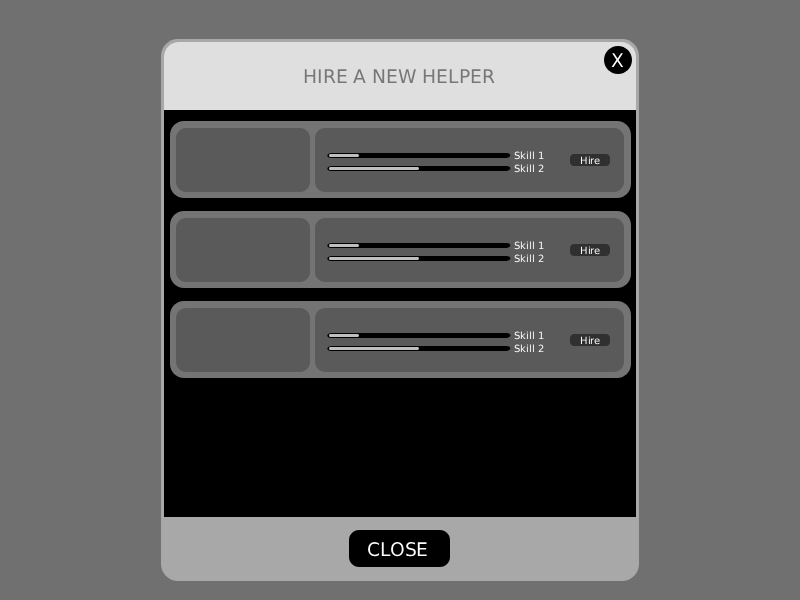
<style>
.page{position:relative;width:800px;height:600px;background:#707070}
.page>*{position:absolute;margin:0}
.t1{font:18.7px "DejaVuSans";color:#ffffff}
.t2{font:18.7px "DejaVuSans";color:#777777}
.t3{font:10px "DejaVuSans";color:#ffffff}
</style>
<div class="page">
<p class="t1" style="left:611px;top:53px;width:13px;height:14px">X</p>
<p class="t2" style="left:304px;top:69px;width:191px;height:14px">HIRE A NEW HELPER</p>
<p class="t3" style="left:514px;top:151px;width:30px;height:9px">Skill 1</p>
<p class="t3" style="left:580px;top:156px;width:20px;height:9px">Hire</p>
<p class="t3" style="left:514px;top:164px;width:30px;height:9px">Skill 2</p>
<p class="t3" style="left:514px;top:241px;width:30px;height:9px">Skill 1</p>
<p class="t3" style="left:580px;top:246px;width:20px;height:9px">Hire</p>
<p class="t3" style="left:514px;top:254px;width:30px;height:9px">Skill 2</p>
<p class="t3" style="left:514px;top:331px;width:30px;height:9px">Skill 1</p>
<p class="t3" style="left:580px;top:336px;width:20px;height:9px">Hire</p>
<p class="t3" style="left:514px;top:344px;width:30px;height:9px">Skill 2</p>
<p class="t1" style="left:368px;top:542px;width:59px;height:15px">CLOSE</p>
</div>
